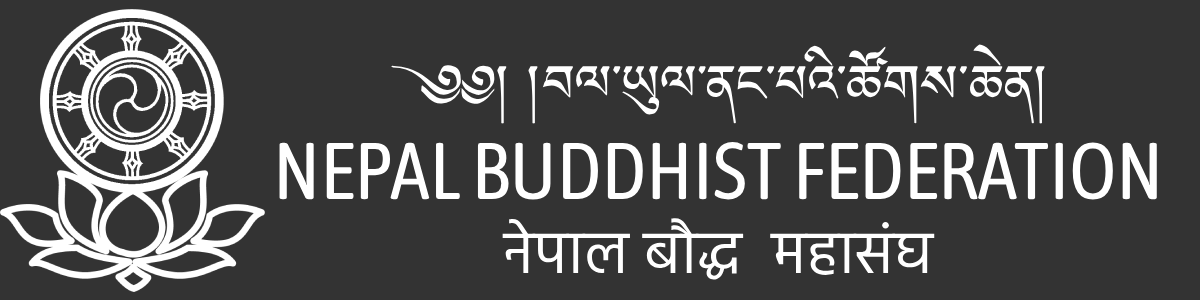
<style>
.page{position:relative;width:1200px;height:300px;background:#333333}
.page>*{position:absolute;margin:0}
.t1{font:61px "MonlamUniOuChan2";color:#ffffff}
.t2{font:80px "AsapCondensed-Regular";color:#ffffff}
.t3{font:61px "Hind-Regular";color:#ffffff}
</style>
<div class="page">
<p class="t1" style="left:391px;top:44px;width:654px;height:80px">༄༅། །བལ་ཡུལ་ནང་པའི་ཚོགས་ཆེན།</p>
<p class="t2" style="left:279px;top:142px;width:878px;height:58px">NEPAL BUDDHIST FEDERATION</p>
<p class="t3" style="left:502px;top:218px;width:433px;height:62px">नेपाल बौद्ध  महासंघ</p>
</div>
